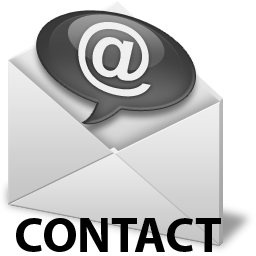
<style>
.page{position:relative;width:256px;height:256px;background:#ffffff}
.page>*{position:absolute;margin:0}
.t1{font:49px "MyriadPro-Bold";color:#000000}
</style>
<div class="page">
<p class="t1" style="left:16px;top:218px;width:205px;height:34px">CONTACT</p>
</div>
